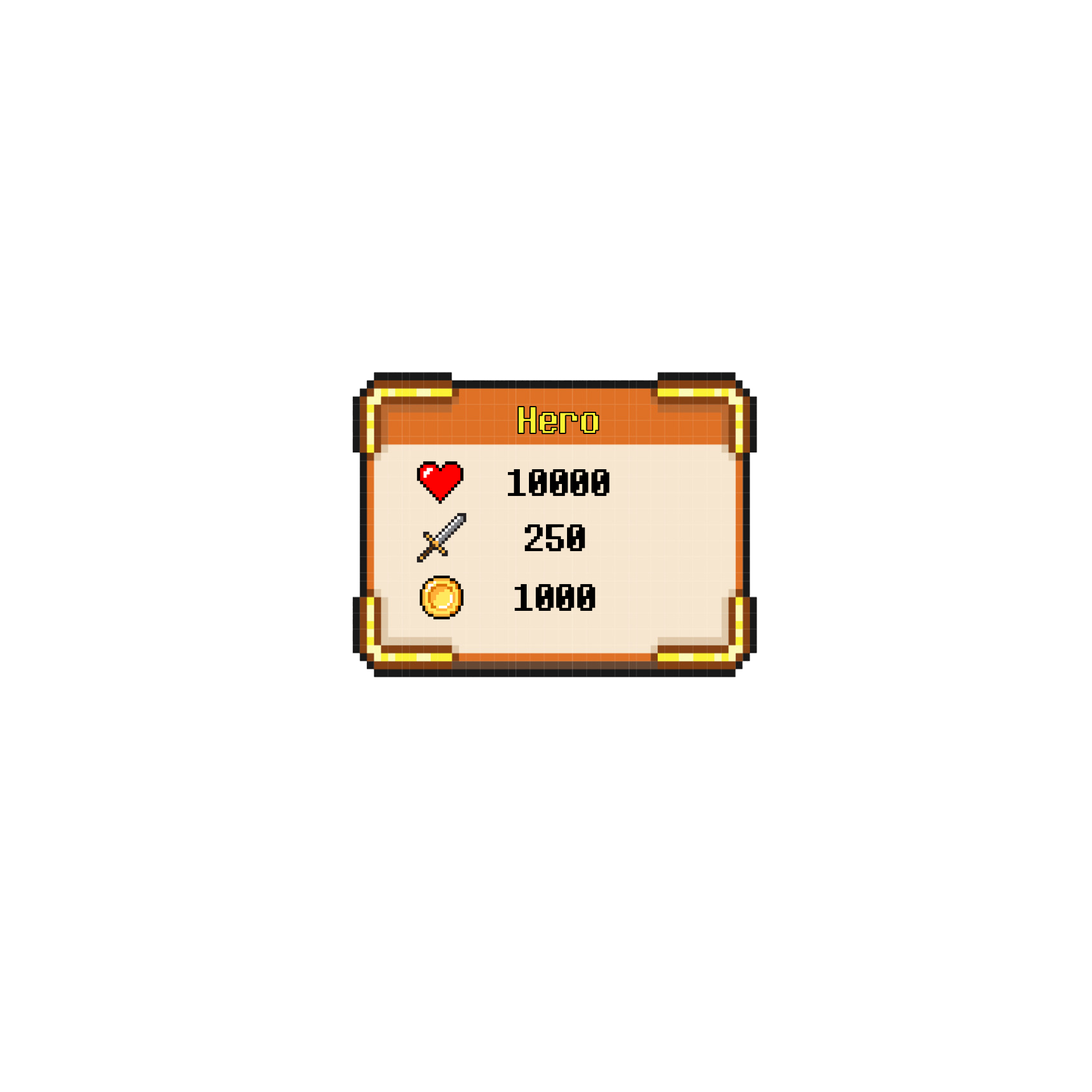
<style>
.page{position:relative;width:1092px;height:1092px;background:#ffffff}
.page>*{position:absolute;margin:0}
.t1{font:39.8px "SVN-DeterminationSans";color:#fbf334}
.t2{font:39.8px "SVN-DeterminationSans";color:#000000}
</style>
<div class="page">
<p class="t1" style="left:518px;top:407px;width:81px;height:27px">Hero</p>
<p class="t2" style="left:508px;top:469px;width:102px;height:27px">10000</p>
<p class="t2" style="left:524px;top:524px;width:61px;height:28px">250</p>
<p class="t2" style="left:515px;top:584px;width:80px;height:27px">1000</p>
</div>
